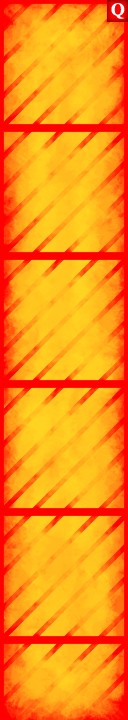
<style>
.page{position:relative;width:128px;height:720px}
.page>*{position:absolute;margin:0}
.t1{font:18px "TimesNewRomanPS-BoldMT";color:#ffffff}
</style>
<div class="page">
<p class="t1" style="left:111px;top:3px;width:14px;height:16px">Q</p>
</div>
